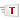
<style>
.page{position:relative;width:20px;height:20px;background:#ffffff}
.page>*{position:absolute;margin:0}
.t1{font:10px "Tahoma-Bold"}
</style>
<div class="page">
<p class="t1" style="left:9px;top:7px;width:6px;height:7px">T</p>
</div>
